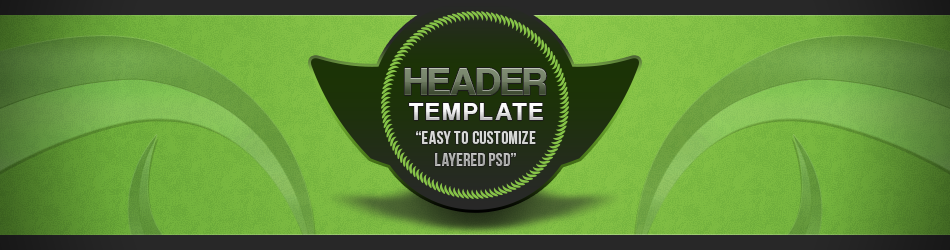
<style>
.page{position:relative;width:950px;height:250px}
.page>*{position:absolute;margin:0}
.t1{font:41.4px "CoolveticaRg-Regular"}
.t2{font:26px "CoolveticaRg-Regular";letter-spacing:0.1em;color:#f4f4f4}
.t3{font:18px "BebasNeue";letter-spacing:0.02em}
</style>
<div class="page">
<p class="t1" style="left:404px;top:68px;width:143px;height:27px">HEADER</p>
<p class="t2" style="left:409px;top:103px;width:134px;height:17px">TEMPLATE</p>
<p class="t3" style="left:416px;top:131px;width:120px;height:35px;text-align:center">“easy to customize<br>Layered PSD”</p>
</div>
